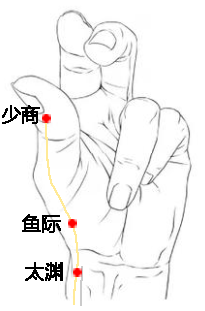
<style>
.page{position:relative;width:205px;height:311px;background:#ffffff}
.page>*{position:absolute;margin:0}
.t1{font:18.7px "MicrosoftYaHei";color:#000000;font-weight:bold}
</style>
<div class="page">
<p class="t1" style="left:2px;top:105px;width:38px;height:19px">少商</p>
<p class="t1" style="left:22px;top:214px;width:39px;height:19px">鱼际</p>
<p class="t1" style="left:25px;top:262px;width:38px;height:19px">太渊</p>
</div>
